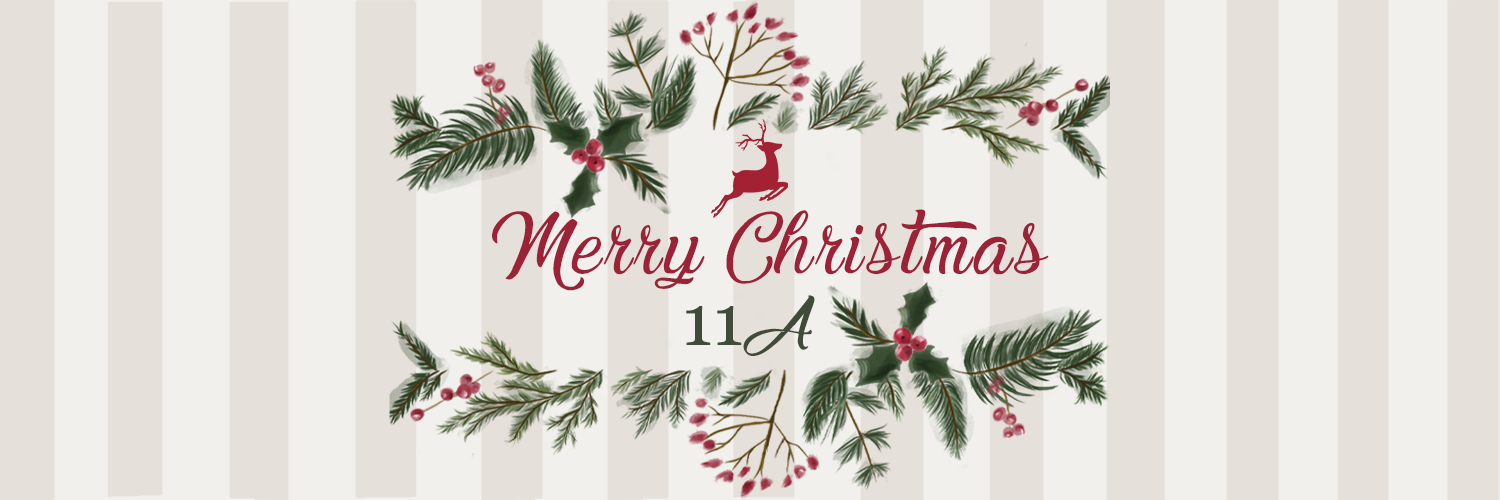
<style>
.page{position:relative;width:1500px;height:500px;background:#e6e0da}
.page>*{position:absolute;margin:0}
.t1{font:90.6px "FTPMelanna";color:#9c2337}
.t2{font:72px "FTPMelanna";color:#404b39}
</style>
<div class="page">
<p class="t1" style="left:492px;top:209px;width:557px;height:82px">Merry Christmas</p>
<p class="t2" style="left:686px;top:295px;width:129px;height:61px">11A</p>
</div>
